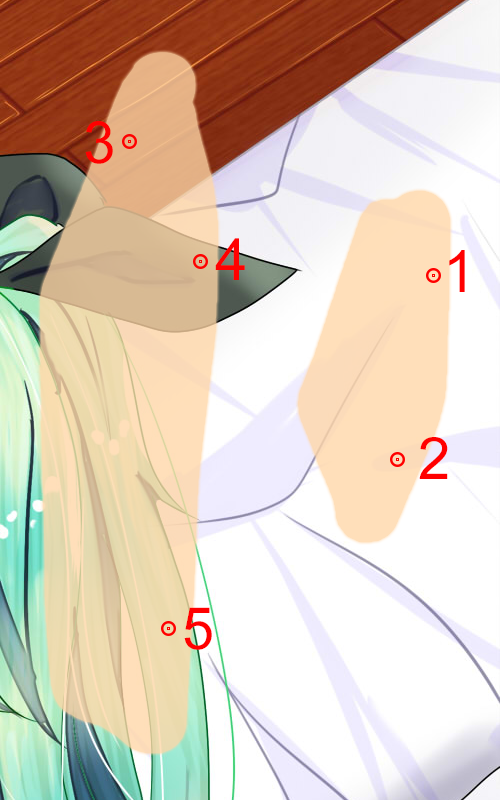
<style>
.page{position:relative;width:500px;height:800px}
.page>*{position:absolute;margin:0}
.t1{font:12px "ArialMT";color:#ff0000}
</style>
<div class="page">
<p class="t1" style="left:85px;top:121px;width:28px;height:43px;text-align:center">3</p>
<p class="t1" style="left:215px;top:238px;width:30px;height:42px;text-align:center">4</p>
<p class="t1" style="left:449px;top:250px;width:16px;height:42px;text-align:center">1</p>
<p class="t1" style="left:419px;top:437px;width:29px;height:42px;text-align:center">2</p>
<p class="t1" style="left:184px;top:607px;width:28px;height:43px;text-align:center">5</p>
</div>
